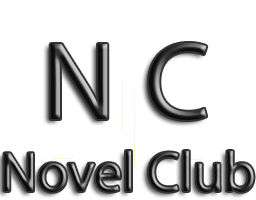
<style>
.page{position:relative;width:256px;height:200px;background:#ffffff}
.page>*{position:absolute;margin:0}
.t1{font:112px "MyriadPro-Regular"}
.t2{font:56px "MyriadPro-Regular"}
</style>
<div class="page">
<p class="t1" style="left:50px;top:44px;width:58px;height:75px">N</p>
<p class="t1" style="left:149px;top:43px;width:58px;height:78px">C</p>
<p class="t2" style="left:4px;top:151px;width:250px;height:41px">Novel Club</p>
</div>
